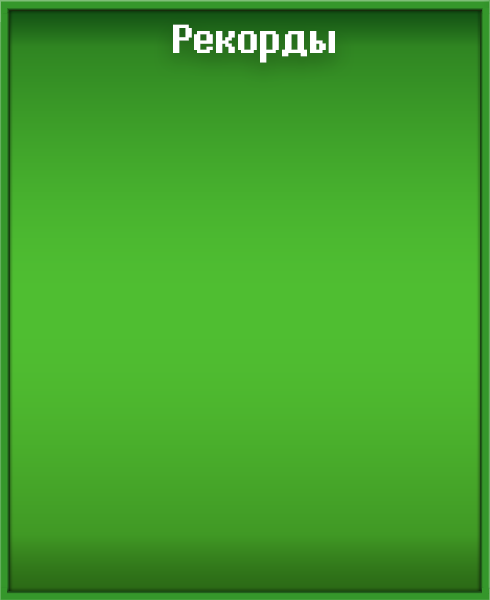
<style>
.page{position:relative;width:490px;height:600px}
.page>*{position:absolute;margin:0}
.t1{font:50px "Determination2";color:#ffffff}
</style>
<div class="page">
<p class="t1" style="left:173px;top:24px;width:162px;height:39px">Рекорды</p>
</div>
